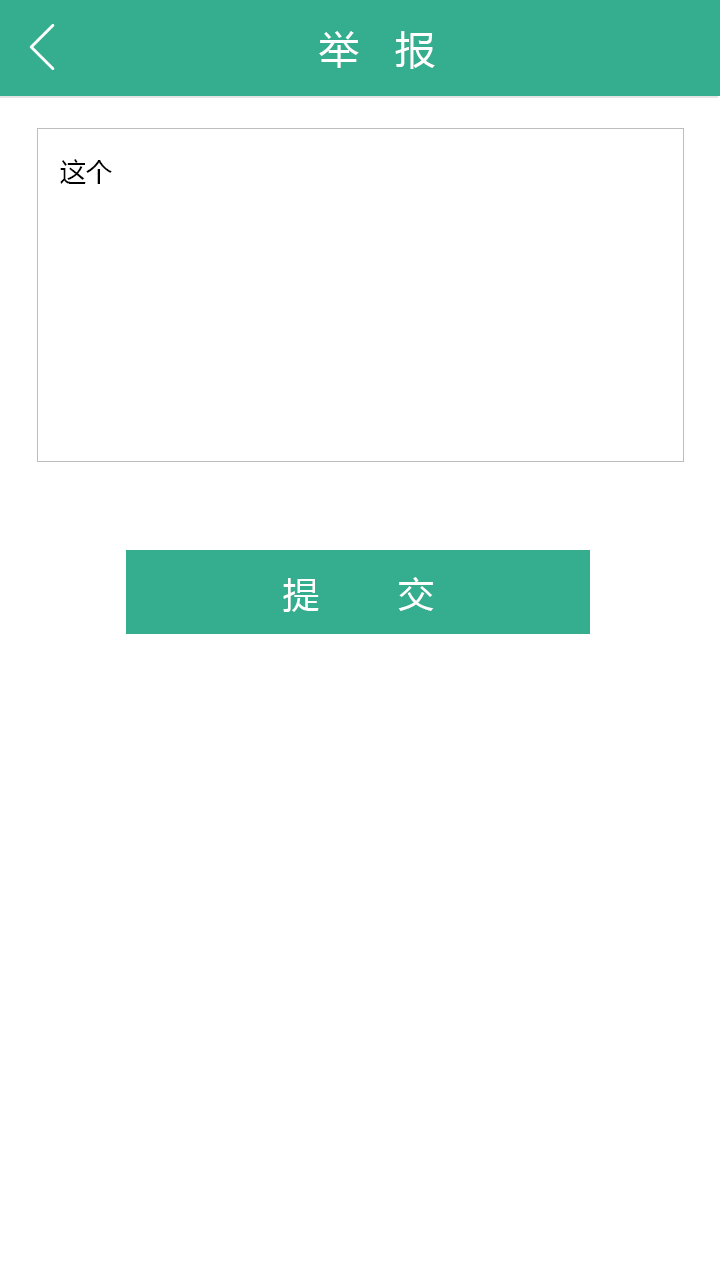
<style>
.page{position:relative;width:720px;height:1280px;background:#ffffff}
.page>*{position:absolute;margin:0}
.t1{font:40px "MicrosoftYaHei";letter-spacing:0.1em;color:#ffffff}
.t2{font:26px "MicrosoftYaHei";color:#000000}
.t3{font:36px "MicrosoftYaHei";letter-spacing:0.2em;color:#ffffff}
</style>
<div class="page">
<p class="t1" style="left:319px;top:31px;width:116px;height:38px">举  报</p>
<p class="t2" style="left:60px;top:159px;width:52px;height:25px">这个</p>
<p class="t3" style="left:283px;top:577px;width:151px;height:35px">提    交</p>
</div>
